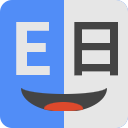
<style>
.page{position:relative;width:128px;height:128px;background:#e6e6e6}
.page>*{position:absolute;margin:0}
.t1{font:72px "NotoSansCJKjp-Bold";color:#e6e6e6}
.t2{font:62px "NotoSansCJKjp-Bold";color:#444444}
</style>
<div class="page">
<p class="t1" style="left:16px;top:22px;width:34px;height:53px">E</p>
<p class="t2" style="left:74px;top:22px;width:44px;height:54px">日</p>
</div>
